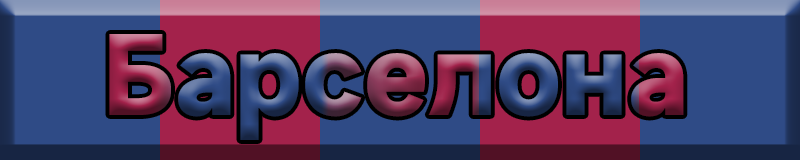
<style>
.page{position:relative;width:800px;height:160px;background:#2f4b86}
.page>*{position:absolute;margin:0}
.t1{font:100px "MiSans-Heavy"}
</style>
<div class="page">
<p class="t1" style="left:109px;top:34px;width:575px;height:106px">Барселона</p>
</div>
